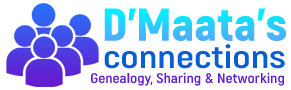
<style>
.page{position:relative;width:291px;height:90px;background:#ffffff}
.page>*{position:absolute;margin:0}
.t1{font:45.9px "Akrobat-Black";scale:1.08 1}
.t2{font:31.7px "Akrobat-Bold";color:#075ed5;scale:1.25 1}
.t3{font:13.9px "Akrobat-Bold";color:#621ed0;scale:1.12 1}
</style>
<div class="page">
<p class="t1" style="left:104px;top:8px;width:182px;height:33px">D’Maata’s</p>
<p class="t2" style="left:104px;top:44px;width:181px;height:25px">connections</p>
<p class="t3" style="left:91px;top:72px;width:193px;height:14px">Genealogy, Sharing &amp; Networking</p>
</div>
